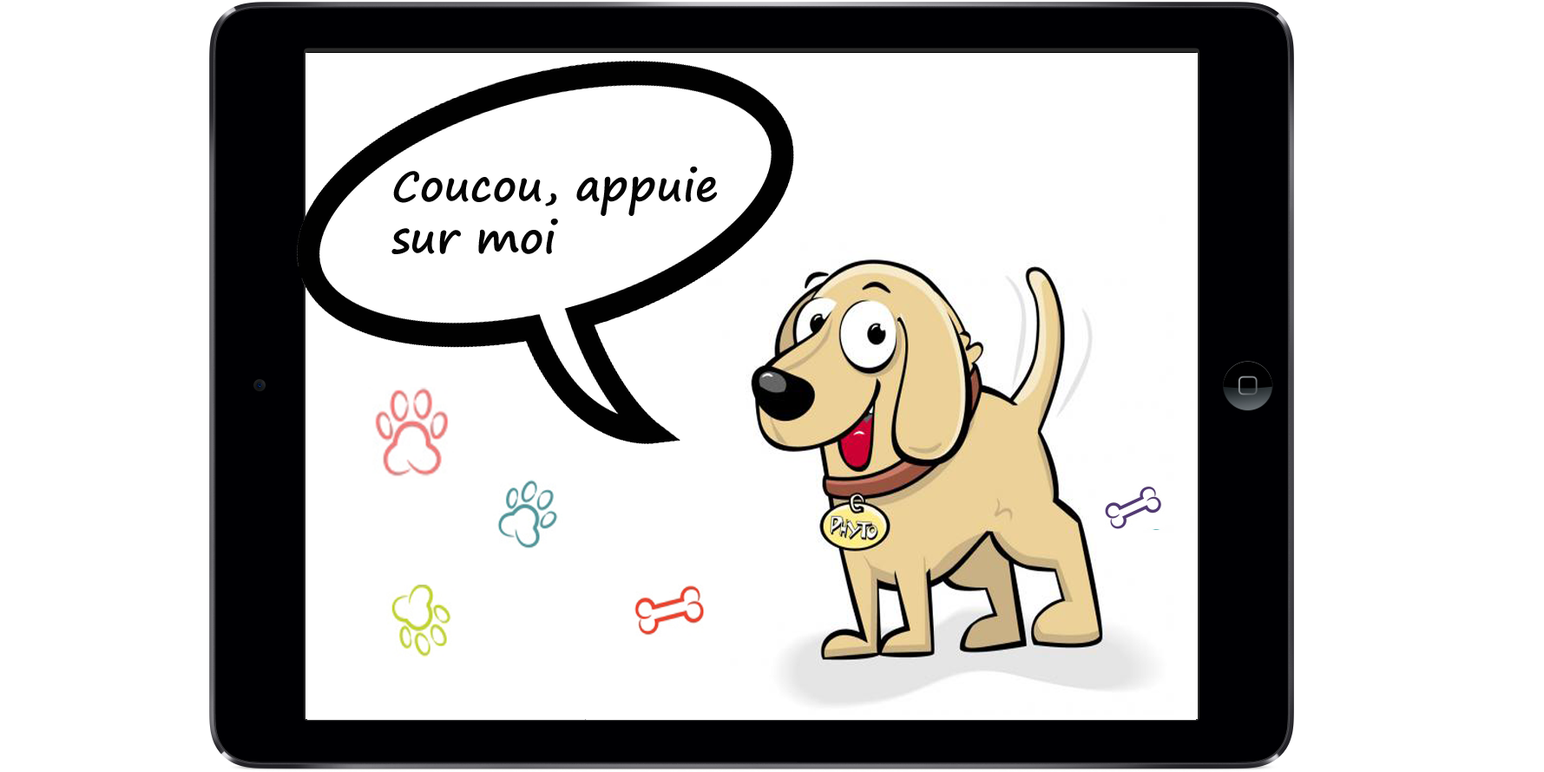
<style>
.page{position:relative;width:1544px;height:772px;background:#ffffff}
.page>*{position:absolute;margin:0}
.t1{font:43.4px "SegoePrint-Bold";color:#040404}
.t2{font:39.8px "SegoePrint-Bold";color:#040404}
</style>
<div class="page">
<p class="t1" style="left:391px;top:167px;width:326px;height:87px"><span class="t2">C</span>oucou, appuie sur moi</p>
</div>
